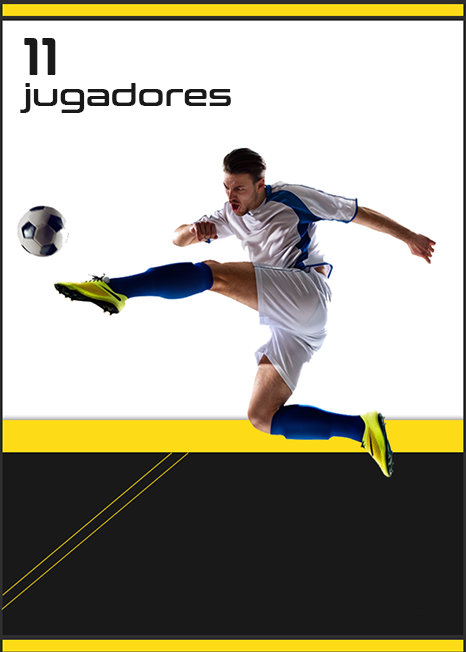
<style>
.page{position:relative;width:466px;height:652px;background:#ffffff}
.page>*{position:absolute;margin:0}
.t1{font:53.5px "ConthraxSb-Regular";color:#191919}
.t2{font:31.2px "ConthraxSb-Regular";color:#191919}
</style>
<div class="page">
<p class="t1" style="left:24px;top:38px;width:32px;height:37px">11</p>
<p class="t2" style="left:20px;top:83px;width:211px;height:30px">jugadores</p>
</div>
